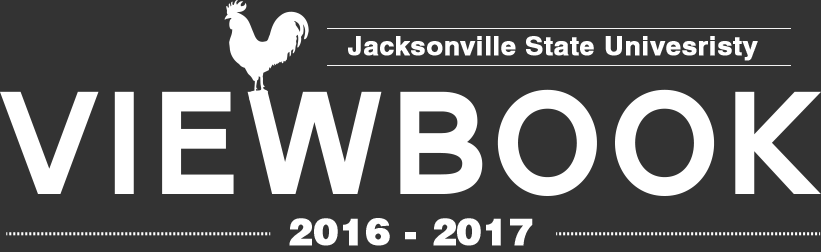
<style>
.page{position:relative;width:821px;height:252px;background:#333333}
.page>*{position:absolute;margin:0}
.t1{font:26px "Helvetica-Bold";color:#ffffff;font-weight:bold;scale:1.05 1}
.t2{font:37.3px "Helvetica-Black";color:#ffffff;font-weight:bold}
</style>
<div class="page">
<p class="t1" style="left:348px;top:36px;width:410px;height:25px">Jacksonville State Univesristy</p>
<p class="t2" style="left:289px;top:218px;width:244px;height:28px">2016 - 2017</p>
</div>
